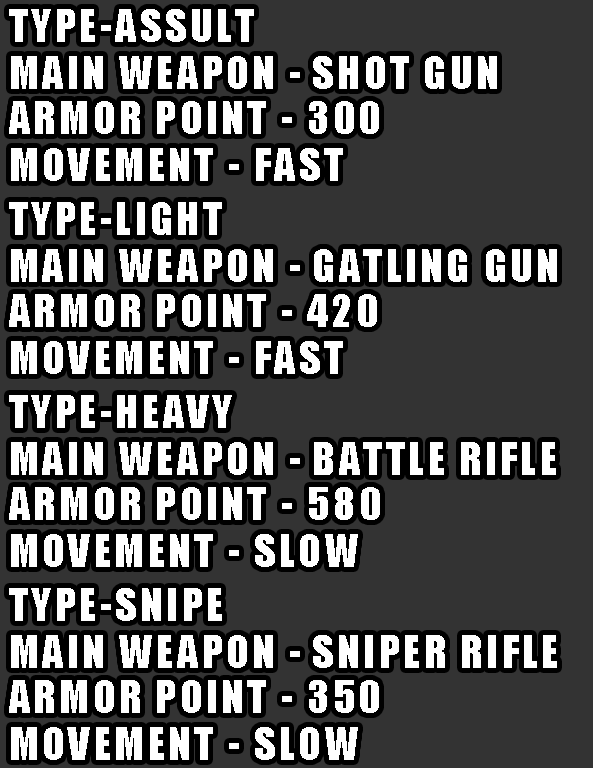
<style>
.page{position:relative;width:593px;height:768px;background:#333333}
.page>*{position:absolute;margin:0}
.t1{font:41.8px "Impact";letter-spacing:0.08em;color:#ffffff}
</style>
<div class="page">
<p class="t1" style="left:9px;top:9px;width:245px;height:33px">TYPE-ASSULT</p>
<p class="t1" style="left:11px;top:56px;width:289px;height:33px">MAIN WEAPON -</p>
<p class="t1" style="left:313px;top:56px;width:184px;height:33px">SHOT GUN</p>
<p class="t1" style="left:9px;top:101px;width:370px;height:33px">ARMOR POINT - 300</p>
<p class="t1" style="left:11px;top:148px;width:332px;height:33px">MOVEMENT - FAST</p>
<p class="t1" style="left:9px;top:202px;width:213px;height:33px">TYPE-LIGHT</p>
<p class="t1" style="left:11px;top:249px;width:289px;height:33px">MAIN WEAPON -</p>
<p class="t1" style="left:314px;top:249px;width:243px;height:33px">GATLING GUN</p>
<p class="t1" style="left:9px;top:294px;width:368px;height:33px">ARMOR POINT - 420</p>
<p class="t1" style="left:11px;top:341px;width:332px;height:33px">MOVEMENT - FAST</p>
<p class="t1" style="left:9px;top:395px;width:223px;height:33px">TYPE-HEAVY</p>
<p class="t1" style="left:11px;top:442px;width:289px;height:33px">MAIN WEAPON -</p>
<p class="t1" style="left:314px;top:442px;width:242px;height:33px">BATTLE RIFLE</p>
<p class="t1" style="left:9px;top:487px;width:371px;height:33px">ARMOR POINT - 580</p>
<p class="t1" style="left:11px;top:534px;width:347px;height:33px">MOVEMENT - SLOW</p>
<p class="t1" style="left:9px;top:588px;width:213px;height:33px">TYPE-SNIPE</p>
<p class="t1" style="left:11px;top:635px;width:289px;height:33px">MAIN WEAPON -</p>
<p class="t1" style="left:313px;top:635px;width:244px;height:33px">SNIPER RIFLE</p>
<p class="t1" style="left:9px;top:680px;width:370px;height:33px">ARMOR POINT - 350</p>
<p class="t1" style="left:11px;top:727px;width:347px;height:33px">MOVEMENT - SLOW</p>
</div>
